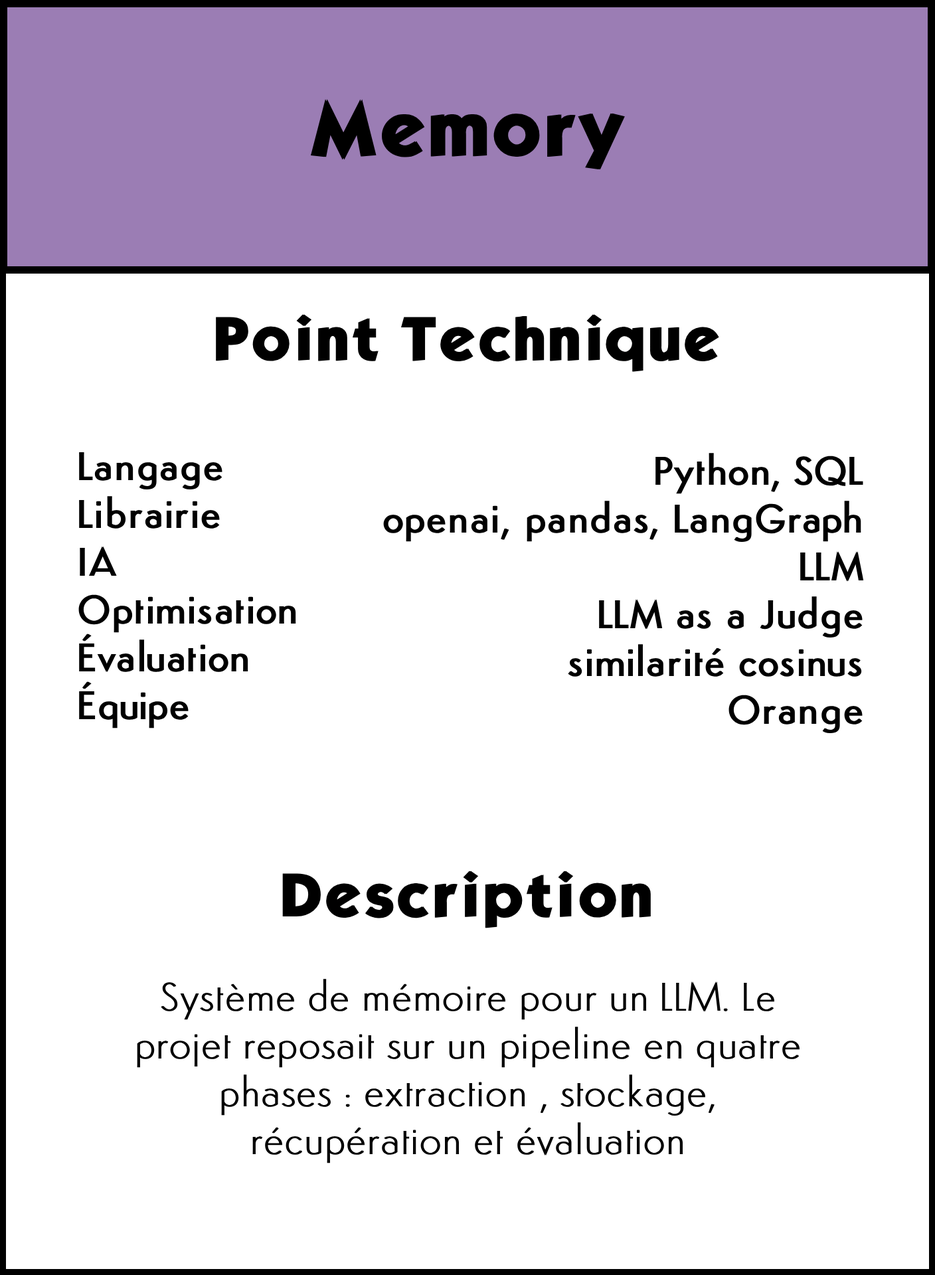
<style>
.page{position:relative;width:935px;height:1275px;background:#ffffff}
.page>*{position:absolute;margin:0}
.t1{font:66.4px "KabelBdNormal";color:#000000;font-weight:bold}
.t2{font:53.1px "KabelBdNormal";color:#000000;font-weight:bold}
.t3{font:39.8px "Semplicita-Medium";color:#000000;font-weight:bold}
.t4{font:39.8px "Semplicita-Light";color:#000000;font-weight:bold}
</style>
<div class="page">
<p class="t1" style="left:310px;top:99px;width:315px;height:70px">Memory</p>
<p class="t2" style="left:216px;top:314px;width:503px;height:58px">Point Technique</p>
<p class="t3" style="left:78px;top:452px;width:218px;height:277px">Langage<br>Librairie<br>IA<br>Optimisation<br>Évaluation<br>Équipe</p>
<p class="t3" style="left:383px;top:453px;width:481px;height:280px;text-align:right">Python, SQL<br>openai, pandas, LangGraph<br>LLM<br>LLM as a Judge<br>similarité cosinus <br>Orange</p>
<p class="t2" style="left:282px;top:871px;width:369px;height:57px">Description</p>
<p class="t4" style="left:137px;top:979px;width:663px;height:185px;text-align:center">Système de mémoire pour un LLM. Le projet reposait sur un pipeline en quatre phases : extraction , stockage, récupération et évaluation</p>
</div>
